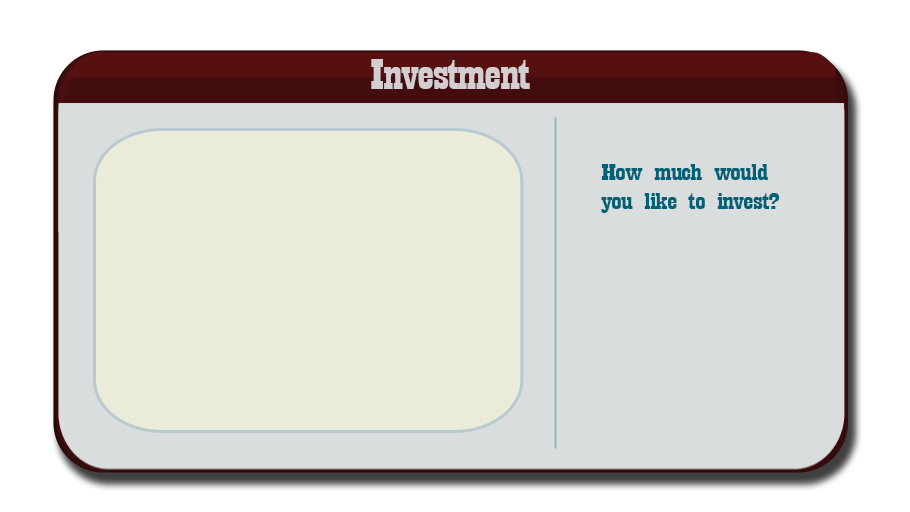
<style>
.page{position:relative;width:910px;height:512px;background:#daddde}
.page>*{position:absolute;margin:0}
.t1{font:44.6px "Playbill";letter-spacing:-0.025em;color:#d3ced1;scale:1.61 1}
.t2{font:24.3px "Playbill";letter-spacing:-0.025em;color:#016277;scale:1.82 1}
</style>
<div class="page">
<p class="t1" style="left:371px;top:59px;width:159px;height:30px">Investment</p>
<p class="t2" style="left:601px;top:164px;width:179px;height:49px;text-align:center">How much would <br>you like to invest?</p>
</div>
